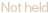
<style>
.page{position:relative;width:50px;height:13px;background:#ffffff}
.page>*{position:absolute;margin:0}
.t1{font:12px "GothicMB101Pro-Regular";letter-spacing:-0.04em;color:#dfceb7}
</style>
<div class="page">
<p class="t1" style="left:1px;top:2px;width:47px;height:10px">Not held</p>
</div>
